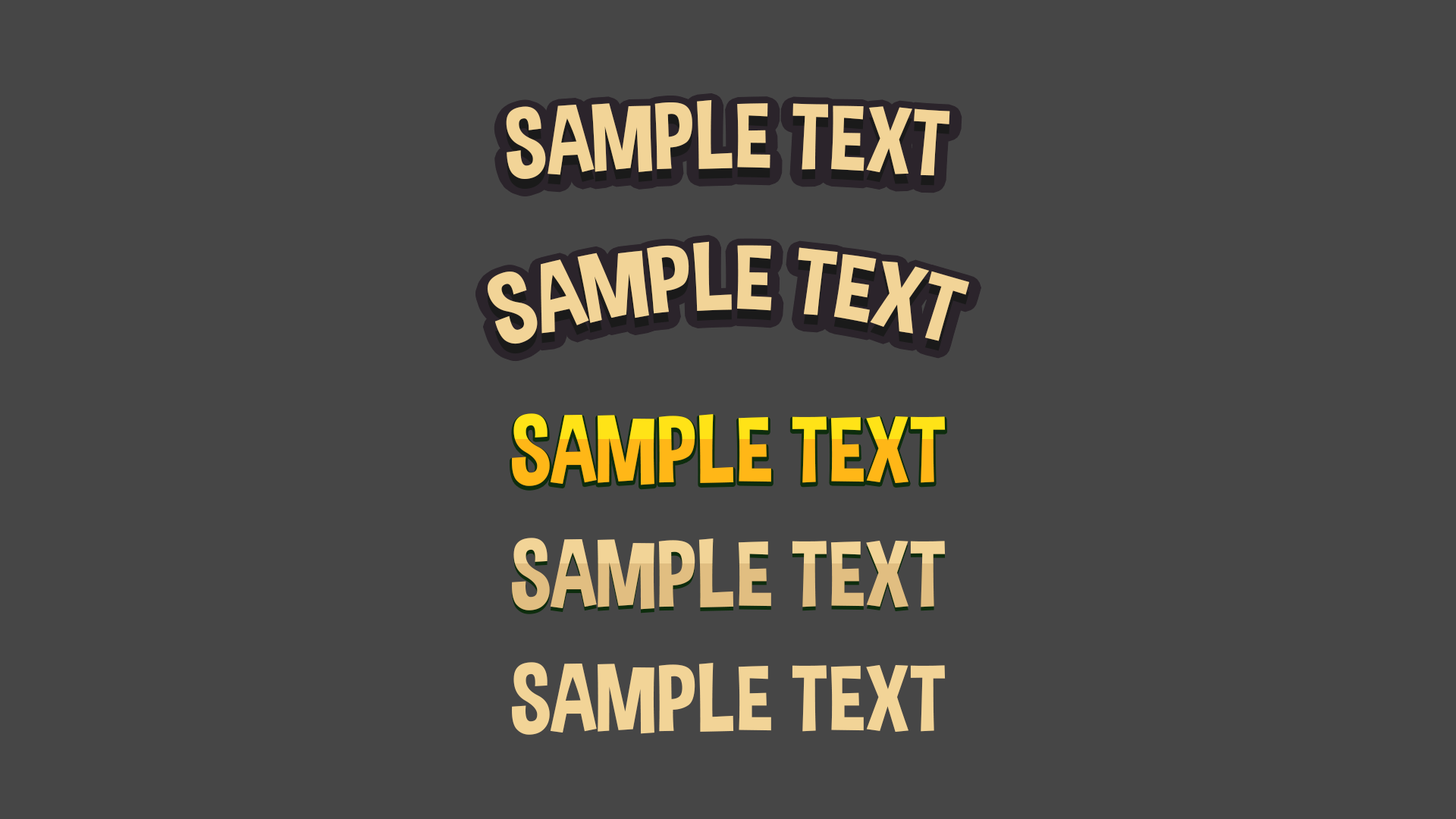
<style>
.page{position:relative;width:1456px;height:819px;background:#464646}
.page>*{position:absolute;margin:0}
.t1{font:94.8px "DimboRegular";color:#f2d497;text-transform:uppercase}
.t2{font:94.8px "DimboRegular";text-transform:uppercase}
</style>
<div class="page">
<p class="t1" style="left:506px;top:99px;width:444px;height:80px">sample text</p>
<p class="t1" style="left:487px;top:241px;width:483px;height:103px">sample text</p>
<p class="t2" style="left:512px;top:413px;width:434px;height:73px">sample text</p>
<p class="t2" style="left:512px;top:538px;width:434px;height:72px">sample text</p>
<p class="t1" style="left:512px;top:662px;width:434px;height:73px">sample text</p>
</div>
